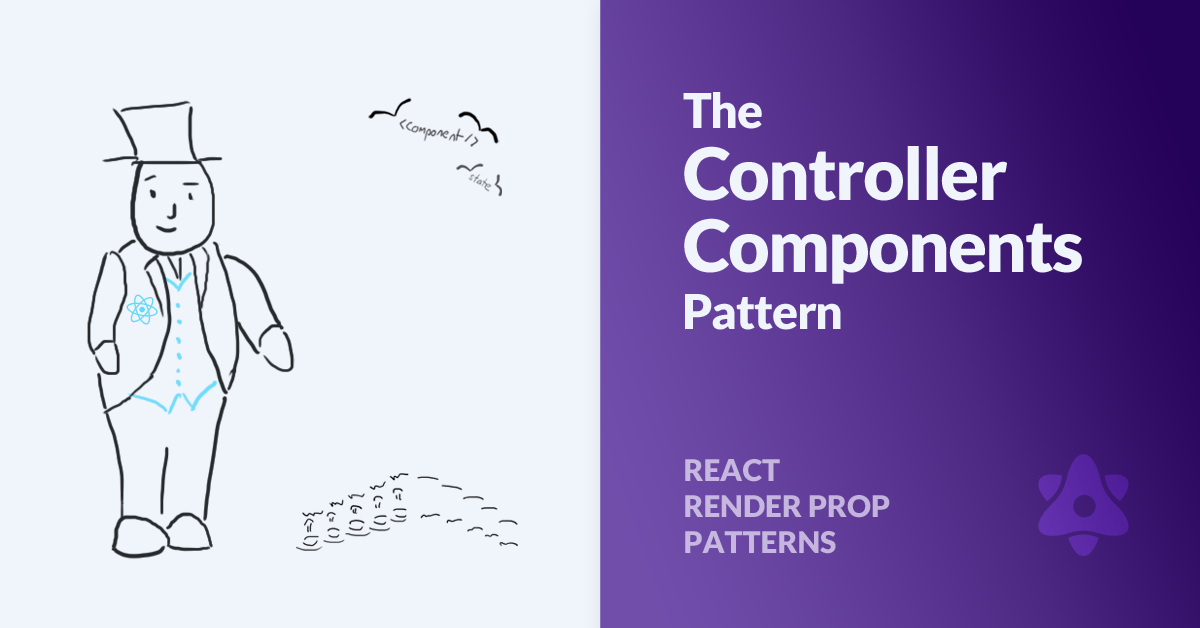
<style>
.page{position:relative;width:1200px;height:628px;background:#f0f4fb}
.page>*{position:absolute;margin:0}
.t1{font:72px/72px "Lato-Black";letter-spacing:-0.025em;color:#f0f4fb}
.t2{font:48px "Lato-Black";letter-spacing:-0.025em;color:#f0f4fb}
.t3{font:30px "Lato-Black";color:#c6b7df}
</style>
<div class="page">
<p class="t1" style="left:683px;top:92px;width:399px;height:238px"><span class="t2">The<br></span>Controller<br>Components<br><span class="t2">Pattern</span></p>
<p class="t3" style="left:685px;top:459px;width:205px;height:95px">REACT<br>RENDER PROP<br>PATTERNS</p>
</div>
